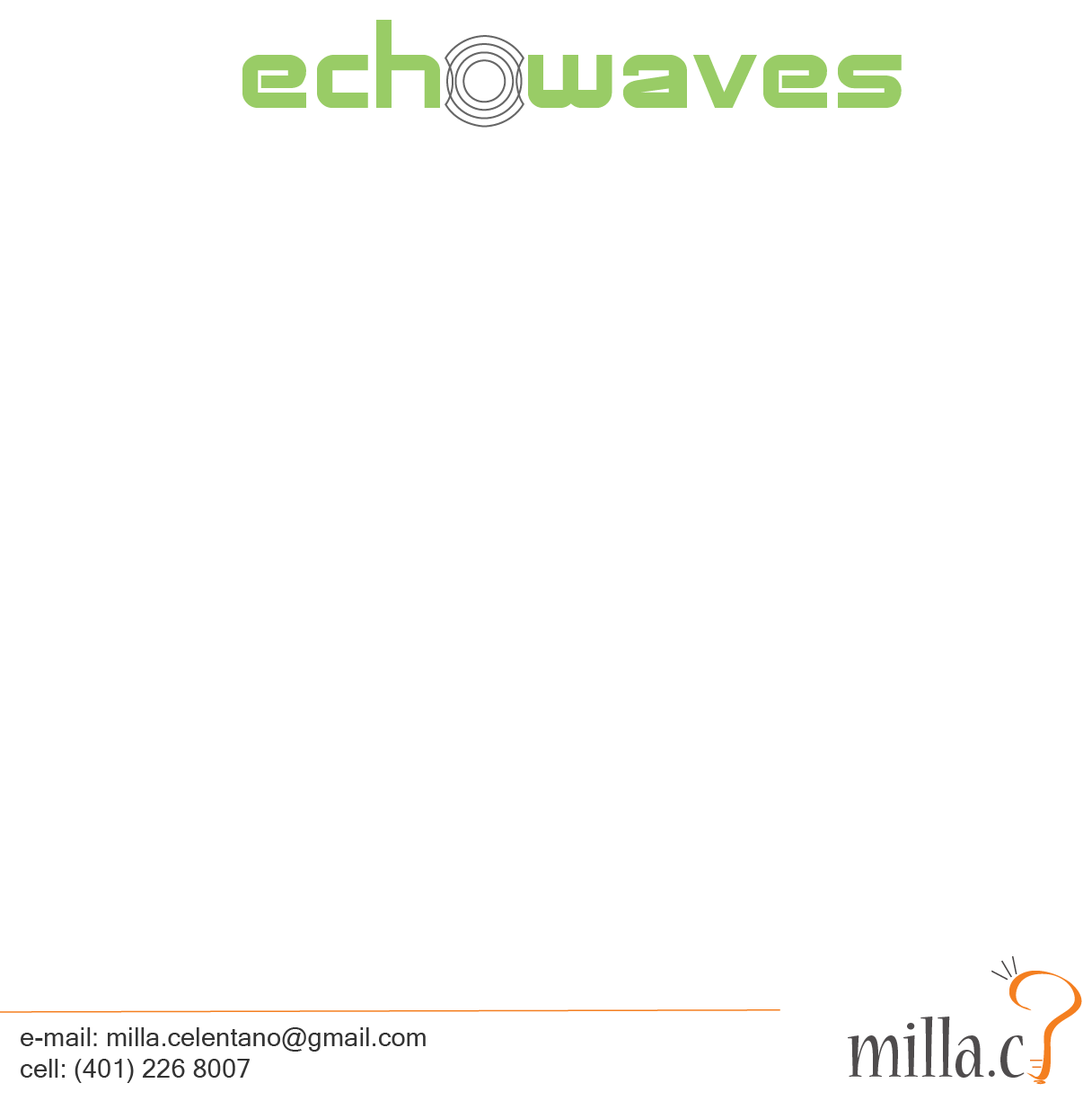
<style>
.page{position:relative;width:1083px;height:1101px;background:#ffffff}
.page>*{position:absolute;margin:0}
.t1{font:126.9px "AdventureSubtitlesNormal";color:#99cc66}
.t2{font:89.8px "NuevaStd-Cond";color:#4f4c4d}
.t3{font:26.2px "MicrosoftSansSerif";color:#333333}
</style>
<div class="page">
<p class="t1" style="left:243px;top:20px;width:197px;height:88px">ech</p>
<p class="t1" style="left:528px;top:55px;width:374px;height:53px">waves</p>
<p class="t2" style="left:848px;top:1016px;width:177px;height:61px">milla.c</p>
<p class="t3" style="left:21px;top:1027px;width:405px;height:56px">e-mail: milla.celentano@gmail.com<br>cell: (401) 226 8007</p>
</div>
